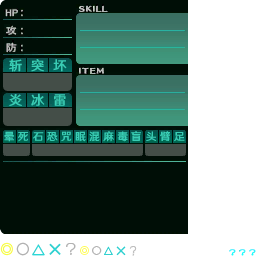
<style>
.page{position:relative;width:256px;height:256px;background:#ffffff}
.page>*{position:absolute;margin:0}
.t1{font:13.3px/34.7px "HYWenHei-FEW";letter-spacing:0.66em;color:#39cdb4}
.t2{font:10.7px "HYWenHei-FEW";letter-spacing:0.32em;color:#39cdb4}
.t3{font:10.7px "HYWenHei-FEW";letter-spacing:0.26em;color:#39cdb4}
</style>
<div class="page">
<p class="t1" style="left:9px;top:59px;width:58px;height:47px">斩突坏<br>炎冰雷</p>
<p class="t2" style="left:4px;top:131px;width:24px;height:11px">晕死</p>
<p class="t2" style="left:33px;top:131px;width:108px;height:11px">石恐咒眠混麻<span class="t3">毒盲</span></p>
<p class="t2" style="left:146px;top:131px;width:39px;height:11px">头臂足</p>
</div>
